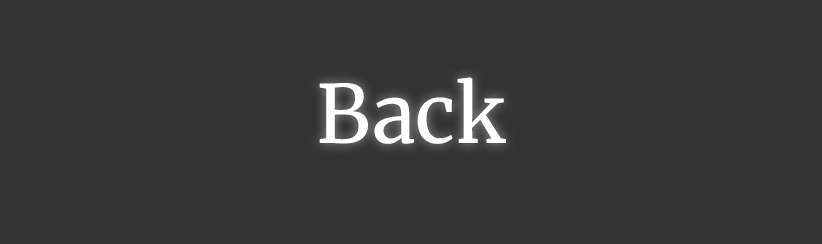
<style>
.page{position:relative;width:822px;height:244px;background:#333333}
.page>*{position:absolute;margin:0}
.t1{font:80px "Merriweather-Regular";color:#ffffff}
</style>
<div class="page">
<p class="t1" style="left:319px;top:77px;width:187px;height:67px">Back</p>
</div>
